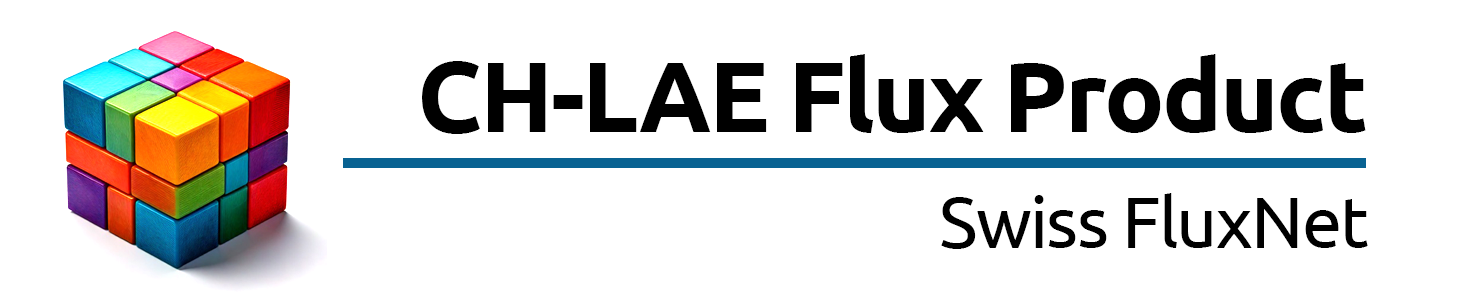
<style>
.page{position:relative;width:1476px;height:303px;background:#ffffff}
.page>*{position:absolute;margin:0}
.t1{font:100px "Ubuntu-Bold";letter-spacing:-0.025em;color:#000000}
.t2{font:72px "Ubuntu-Regular";letter-spacing:-0.025em;color:#000000}
</style>
<div class="page">
<p class="t1" style="left:422px;top:54px;width:944px;height:80px">CH-LAE Flux Product</p>
<p class="t2" style="left:941px;top:193px;width:427px;height:56px">Swiss FluxNet</p>
</div>
